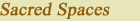
<style>
.page{position:relative;width:140px;height:21px;background:#e6e6b8}
.page>*{position:absolute;margin:0}
.t1{font:18px "TimesNewRomanPSMT";color:#915c07;font-weight:bold;font-style:italic}
</style>
<div class="page">
<p class="t1" style="left:0px;top:2px;width:110px;height:17px">Sacred Spaces</p>
</div>
